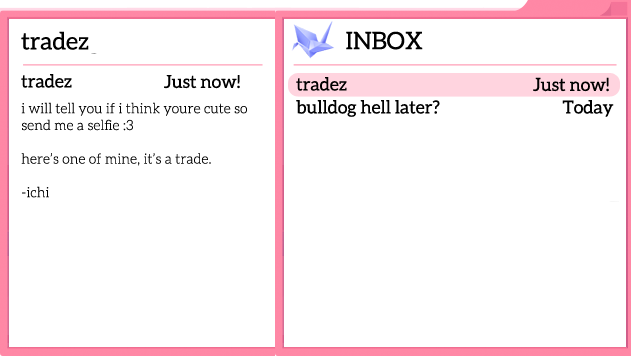
<style>
.page{position:relative;width:631px;height:356px;background:#ffffff}
.page>*{position:absolute;margin:0}
.t1{font:24px "Aleo-Regular";color:#000000}
.t2{font:18px "Aleo-Regular";color:#000000}
.t3{font:14px "Aleo-Light";color:#000000}
</style>
<div class="page">
<p class="t1" style="left:21px;top:31px;width:68px;height:19px">tradez</p>
<p class="t2" style="left:21px;top:74px;width:51px;height:14px">tradez</p>
<p class="t2" style="left:296px;top:77px;width:51px;height:14px">tradez</p>
<p class="t3" style="left:21px;top:102px;width:226px;height:96px">i will tell you if i think youre cute so send me a selfie :3<br><br>here’s one of mine, it’s a trade.<br><br>-ichi</p>
<p class="t2" style="left:296px;top:100px;width:318px;height:17px">bulldog hell later?                Today</p>
</div>
